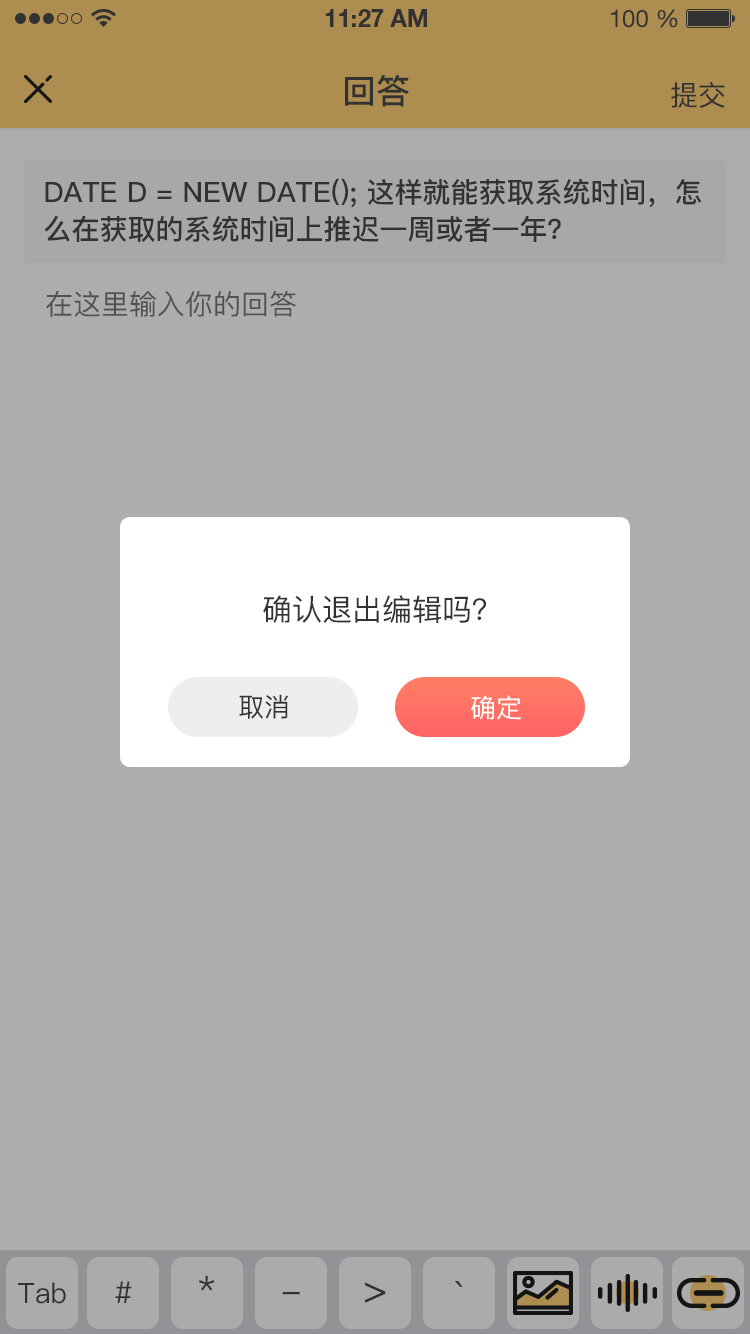
<style>
.page{position:relative;width:750px;height:1334px;background:#adadad}
.page>*{position:absolute;margin:0}
.t1{font:34px "PingFang-SC-Bold";color:#333333;text-transform:uppercase}
.t2{font:28px "PingFang-SC-Medium";color:#333333;text-transform:uppercase}
.t3{font:28px/37px "PingFang-SC-Bold";color:#333333;text-transform:uppercase}
.t4{font:28px "PingFang-SC-Medium";color:#666666;text-transform:uppercase}
.t5{font:30px "PingFang-SC-Medium";color:#333333;text-transform:uppercase}
.t6{font:26px "PingFang-SC-Medium";color:#333333;text-transform:uppercase}
.t7{font:26px "PingFang-SC-Medium";color:#fffefe;text-transform:uppercase}
.t8{font:34px "PingFang-SC-Medium";color:#333333}
.t9{font:28px "PingFang-SC-Medium";color:#333333}
.t10{font:30px "PingFang-SC-Medium";color:#333333}
.t11{font:40px "PingFang-SC-Medium";color:#333333}
</style>
<div class="page">
<p class="t1" style="left:345px;top:74px;width:64px;height:33px">回答</p>
<p class="t2" style="left:671px;top:82px;width:54px;height:26px">提交</p>
<p class="t3" style="left:44px;top:178px;width:658px;height:64px">Date d = new Date(); 这样就能获取系统时间，怎<br>么在获取的系统时间上推迟一周或者一年？</p>
<p class="t4" style="left:46px;top:290px;width:250px;height:27px">在这里输入你的回答</p>
<p class="t5" style="left:263px;top:595px;width:223px;height:28px">确认退出编辑吗？</p>
<p class="t6" style="left:239px;top:694px;width:49px;height:25px">取消</p>
<p class="t7" style="left:471px;top:695px;width:50px;height:25px">确定</p>
<p class="t8" style="left:199px;top:1275px;width:16px;height:16px">*</p>
<p class="t9" style="left:18px;top:1282px;width:48px;height:22px"><span class="t2">T</span>ab</p>
<p class="t10" style="left:115px;top:1281px;width:17px;height:22px">#</p>
<p class="t11" style="left:365px;top:1282px;width:21px;height:21px">&gt;</p>
<p class="t11" style="left:454px;top:1281px;width:9px;height:6px">`</p>
<p class="t8" style="left:282px;top:1292px;width:18px;height:3px">-</p>
</div>
